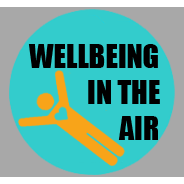
<style>
.page{position:relative;width:184px;height:184px;background:#33cccc}
.page>*{position:absolute;margin:0}
.t1{font:30px "Impact";color:#000000}
</style>
<div class="page">
<p class="t1" style="left:28px;top:44px;width:132px;height:96px">WELLBEING<br>           IN THE<br>                 AIR</p>
</div>
